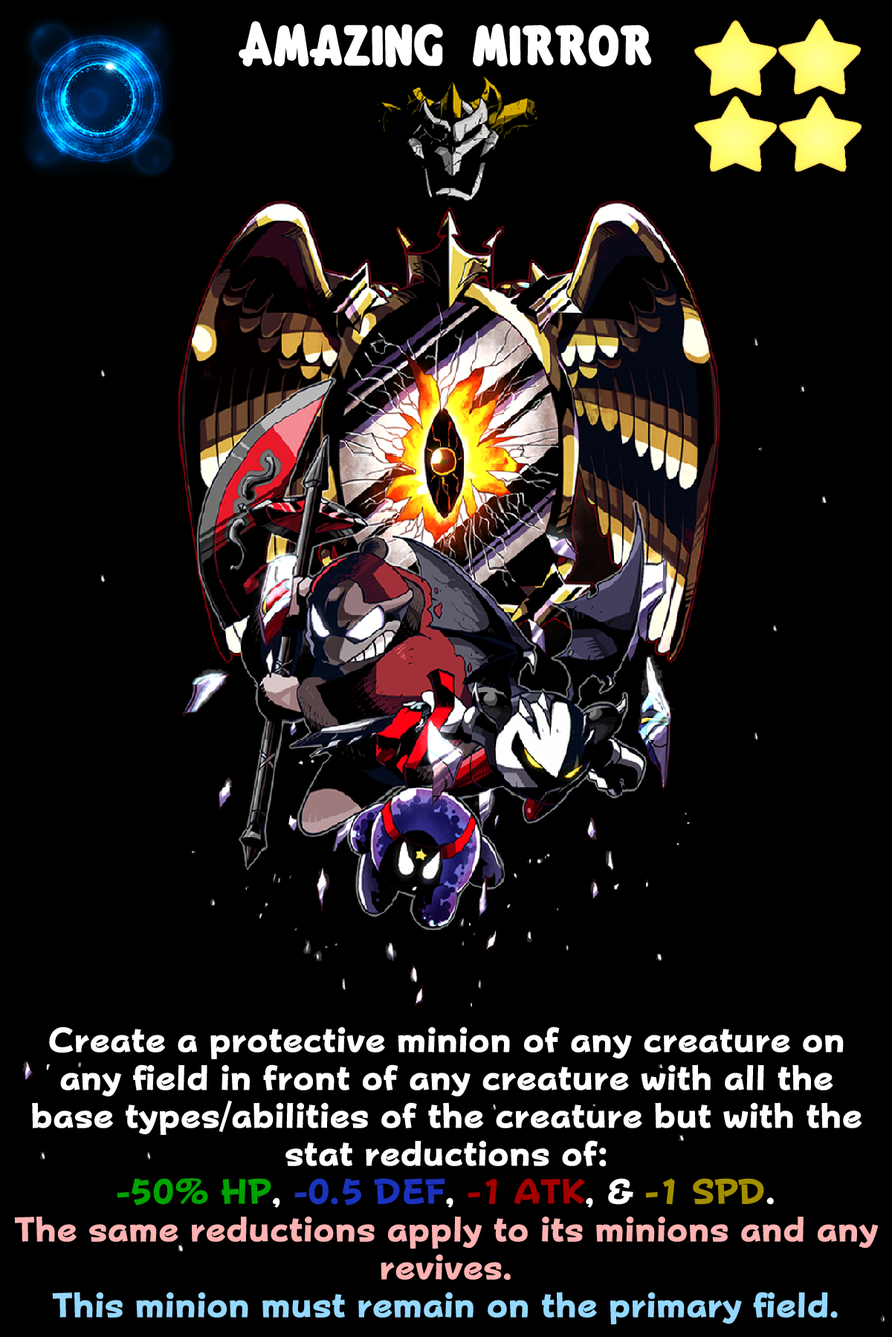
<style>
.page{position:relative;width:892px;height:1337px;background:#000000}
.page>*{position:absolute;margin:0}
.t1{font:95.8px "KirbyClassic";color:#ffffff}
.t2{font:59.4px/37.9px "FOT-PopHappinessStd-EB";color:#ffffff}
.t3{font:59.4px/37.9px "FOT-PopHappinessStd-EB";color:#00a300}
.t4{font:59.4px/37.9px "FOT-PopHappinessStd-EB";color:#1b32bd}
.t5{font:59.4px/37.9px "FOT-PopHappinessStd-EB";color:#a30000}
.t6{font:59.4px/37.9px "FOT-PopHappinessStd-EB";color:#a38e00}
.t7{font:59.4px/37.9px "FOT-PopHappinessStd-EB";color:#ffb2b2}
.t8{font:59.4px/37.9px "FOT-PopHappinessStd-EB";color:#95d8ff}
</style>
<div class="page">
<p class="t1" style="left:239px;top:21px;width:413px;height:47px">Amazing mirror</p>
<p class="t2" style="left:14px;top:1027px;width:864px;height:298px;text-align:center">Create a protective minion of any creature on any field in front of any creature with all the base types/abilities of the creature but with the stat reductions of: <br><span class="t3">-50% HP</span>, <span class="t4">-0.5 DEF</span>, <span class="t5">-1 ATK</span>, &amp; <span class="t6">-1 SPD</span>.<br><span class="t7">The same reductions apply to its minions and any revives.<br></span><span class="t8">This minion must remain on the primary field.</span></p>
</div>
